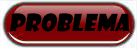
<style>
.page{position:relative;width:137px;height:50px}
.page>*{position:absolute;margin:0}
.t1{font:23px "ShowcardGothic-Reg";color:#000000;font-style:italic}
</style>
<div class="page">
<p class="t1" style="left:10px;top:13px;width:120px;height:19px">PROBLEMA</p>
</div>
